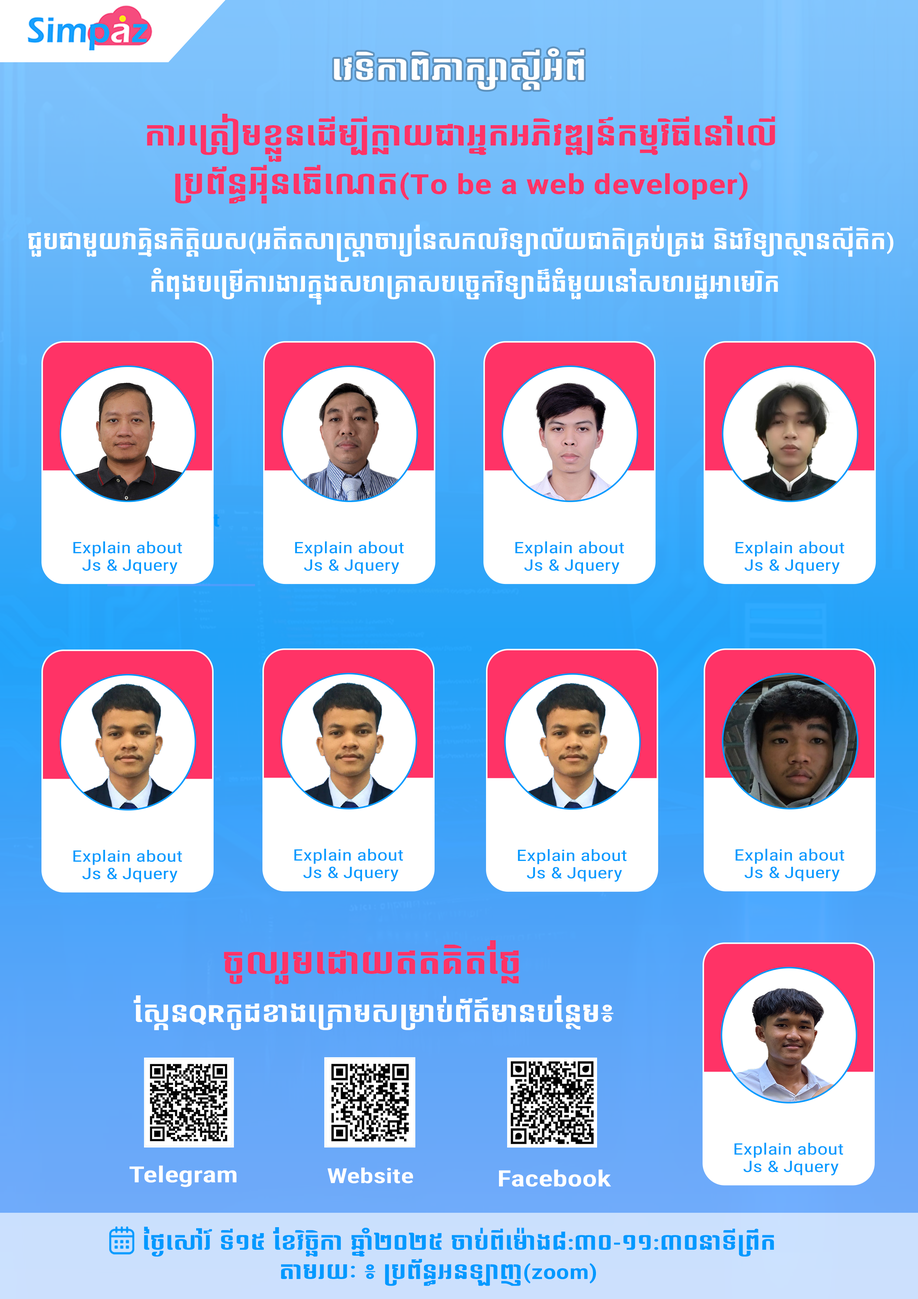
<style>
.page{position:relative;width:918px;height:1299px}
.page>*{position:absolute;margin:0}
.t1{font:28.7px "NiDA-Bayon";color:#ffffff;scale:1.32 1}
.t2{font:27.8px/48.6px "NiDA-Bayon";color:#ff3366;scale:1.32 1}
.t3{font:27.8px/48.6px "Roboto-CondensedSemiBold";color:#ff3366;scale:1.32 1}
.t4{font:21.8px/42.5px "NiDA-Bayon";color:#ffffff;scale:1.23 1}
.t5{font:21.8px/42.5px "Roboto-CondensedSemiBold";color:#ffffff;scale:1.23 1}
.t6{font:15.8px/17.2px "Roboto-CondensedRegular";color:#0099ff;scale:1.32 1}
.t7{font:29.8px "NiDA-Bayon";color:#ff3366;scale:1.32 1}
.t8{font:23.7px "NiDA-Bayon";color:#ffffff;scale:1.32 1}
.t9{font:23.7px "Roboto-CondensedExtraBold";color:#ffffff;scale:1.32 1}
.t10{font:22.3px "Roboto-CondensedSemiBold";color:#ffffff;scale:1.32 1}
.t11{font:20.7px "Roboto-CondensedSemiBold";color:#ffffff;scale:1.32 1}
.t12{font:22.5px "Roboto-CondensedSemiBold";color:#ffffff;scale:1.32 1}
.t13{font:20.1px "NiDA-Bayon";color:#0099ff;scale:1.32 1}
.t14{font:20.1px "Roboto-CondensedSemiBold";color:#0099ff;scale:1.32 1}
</style>
<div class="page">
<p class="t1" style="left:334px;top:48px;width:250px;height:42px">វេទិកាពិភាក្សាស្តីអំពី</p>
<p class="t2" style="left:147px;top:114px;width:628px;height:90px;text-align:center">ការត្រៀមខ្លួនដើម្បីក្លាយជាអ្នកអភិវឌ្ឍន៍កម្មវិធីនៅលើ<br>ប្រព័ន្ធអ៊ីនធើណេត<span class="t3">(To be a web developer)</span></p>
<p class="t4" style="left:28px;top:224px;width:866px;height:81px;text-align:center">ជួបជាមួយវាគ្មិនកិតិ្តយស<span class="t5">(</span>អតីតសាស្ត្រាចារ្យនែសកលវិទ្យាល័យជាតិគ្រប់គ្រង និងវិទ្យាស្ថានស៊ីតិក<span class="t5">)<br></span> កំពុងបម្រើការងារក្នុងសហគ្រាសបច្ចេកវិទ្យាដ៏ធំមួយនៅសហរដ្ឋអាមេរិក</p>
<p class="t6" style="left:73px;top:541px;width:109px;height:33px;text-align:center">Explain about <br>Js &amp; Jquery</p>
<p class="t6" style="left:295px;top:541px;width:109px;height:33px;text-align:center">Explain about <br>Js &amp; Jquery</p>
<p class="t6" style="left:515px;top:541px;width:109px;height:33px;text-align:center">Explain about <br>Js &amp; Jquery</p>
<p class="t6" style="left:736px;top:541px;width:108px;height:33px;text-align:center">Explain about <br>Js &amp; Jquery</p>
<p class="t6" style="left:73px;top:850px;width:109px;height:32px;text-align:center">Explain about <br>Js &amp; Jquery</p>
<p class="t6" style="left:294px;top:849px;width:109px;height:32px;text-align:center">Explain about <br>Js &amp; Jquery</p>
<p class="t6" style="left:518px;top:849px;width:109px;height:32px;text-align:center">Explain about <br>Js &amp; Jquery</p>
<p class="t6" style="left:736px;top:849px;width:108px;height:32px;text-align:center">Explain about <br>Js &amp; Jquery</p>
<p class="t7" style="left:224px;top:940px;width:295px;height:44px">ចូលរួមដោយឥតគិតថ្លែ</p>
<p class="t8" style="left:134px;top:995px;width:479px;height:35px">ស្កែន<span class="t9">QR</span>កូដខាងក្រោមសម្រាប់ព័ត៍មានបន្ថែម៖</p>
<p class="t6" style="left:735px;top:1143px;width:108px;height:32px;text-align:center">Explain about <br>Js &amp; Jquery</p>
<p class="t10" style="left:130px;top:1165px;width:107px;height:22px">Telegram</p>
<p class="t11" style="left:328px;top:1167px;width:85px;height:16px">Website</p>
<p class="t12" style="left:499px;top:1169px;width:112px;height:18px">Facebook</p>
<p class="t13" style="left:144px;top:1226px;width:630px;height:31px">ថ្ងៃសៅរ៍ ទី១៥ ខែវិច្ឆិកា ឆ្នាំ២០២៥ ចាប់ពីម៉ោង៨<span class="t14">:</span>៣០<span class="t14">-</span>១១<span class="t14">:</span>៣០នាទីព្រឹក</p>
<p class="t13" style="left:281px;top:1258px;width:315px;height:28px">តាមរយៈ ៖ ប្រព័ន្ធអនឡាញ<span class="t14">(zoom)​</span></p>
</div>
